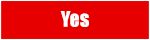
<style>
.page{position:relative;width:150px;height:40px;background:#e70000}
.page>*{position:absolute;margin:0}
.t1{font:20px "Impact";color:#fefffe}
</style>
<div class="page">
<p class="t1" style="left:60px;top:11px;width:29px;height:16px">Yes</p>
</div>
